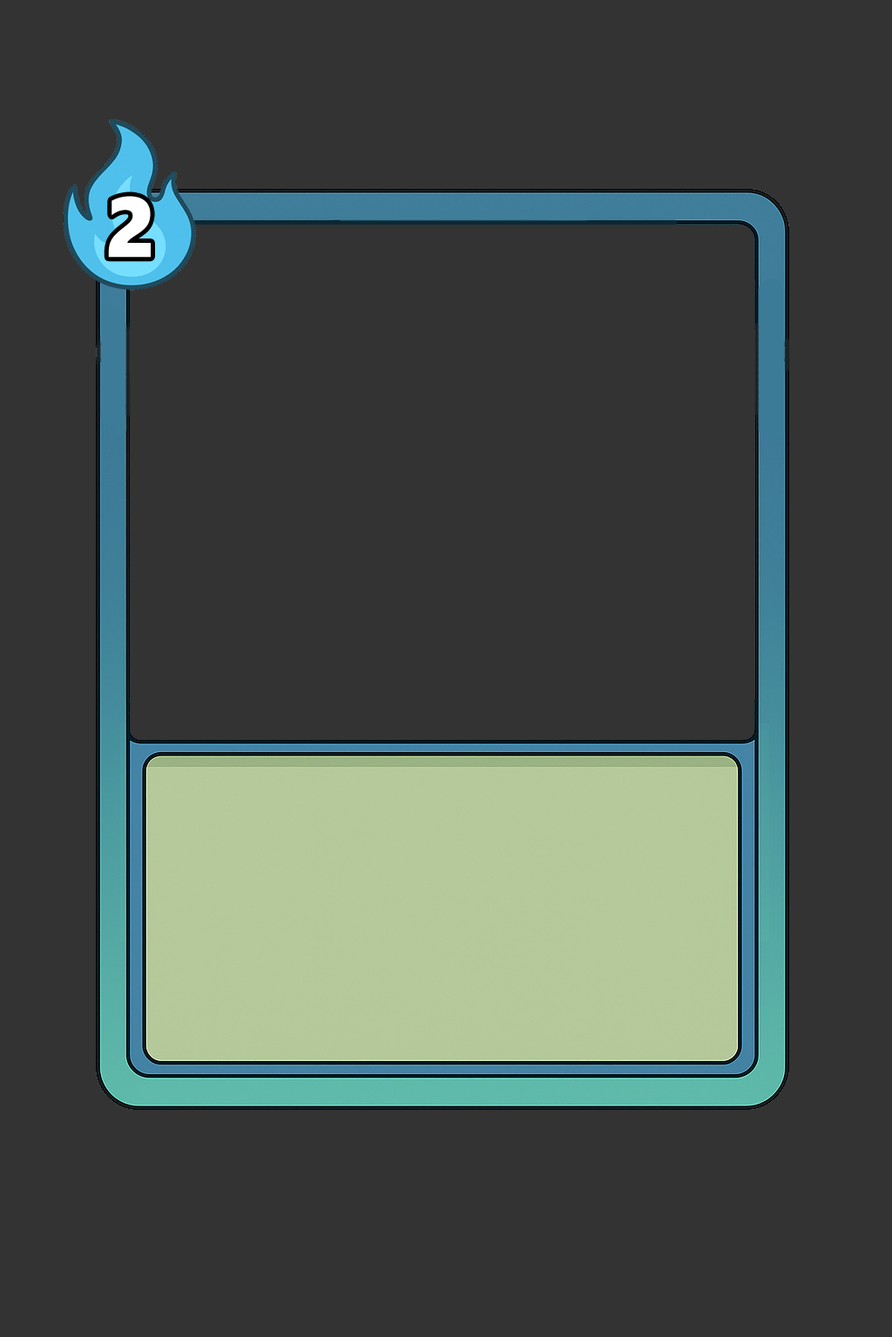
<style>
.page{position:relative;width:892px;height:1337px;background:#333333}
.page>*{position:absolute;margin:0}
.t1{font:85.3px "MicrosoftYaHeiHeavy";color:#ffffff}
</style>
<div class="page">
<p class="t1" style="left:108px;top:196px;width:43px;height:62px">2</p>
</div>
